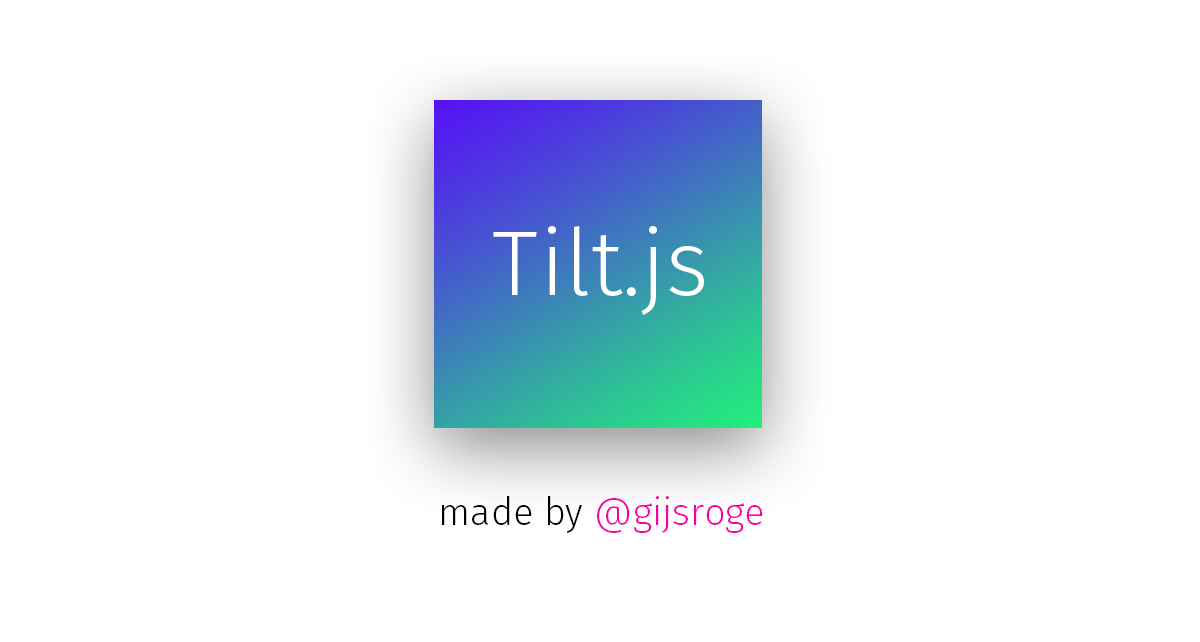
<style>
.page{position:relative;width:1200px;height:642px;background:#ffffff}
.page>*{position:absolute;margin:0}
.t1{font:91.9px "FiraSans-Light";color:#ffffff}
.t2{font:38px "FiraSans-Light";color:#f700a3}
.t3{font:38px "FiraSans-Light";color:#000000}
</style>
<div class="page">
<p class="t1" style="left:493px;top:226px;width:211px;height:89px">Tilt.js</p>
<p class="t2" style="left:442px;top:496px;width:321px;height:37px"><span class="t3">made by </span>@gijsroge</p>
</div>
